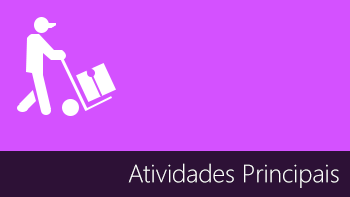
<style>
.page{position:relative;width:350px;height:197px;background:#d451ff}
.page>*{position:absolute;margin:0}
.t1{font:25px "SegoeUI-Light";color:#fefefe}
</style>
<div class="page">
<p class="t1" style="left:128px;top:163px;width:211px;height:25px">Atividades Principais</p>
</div>
